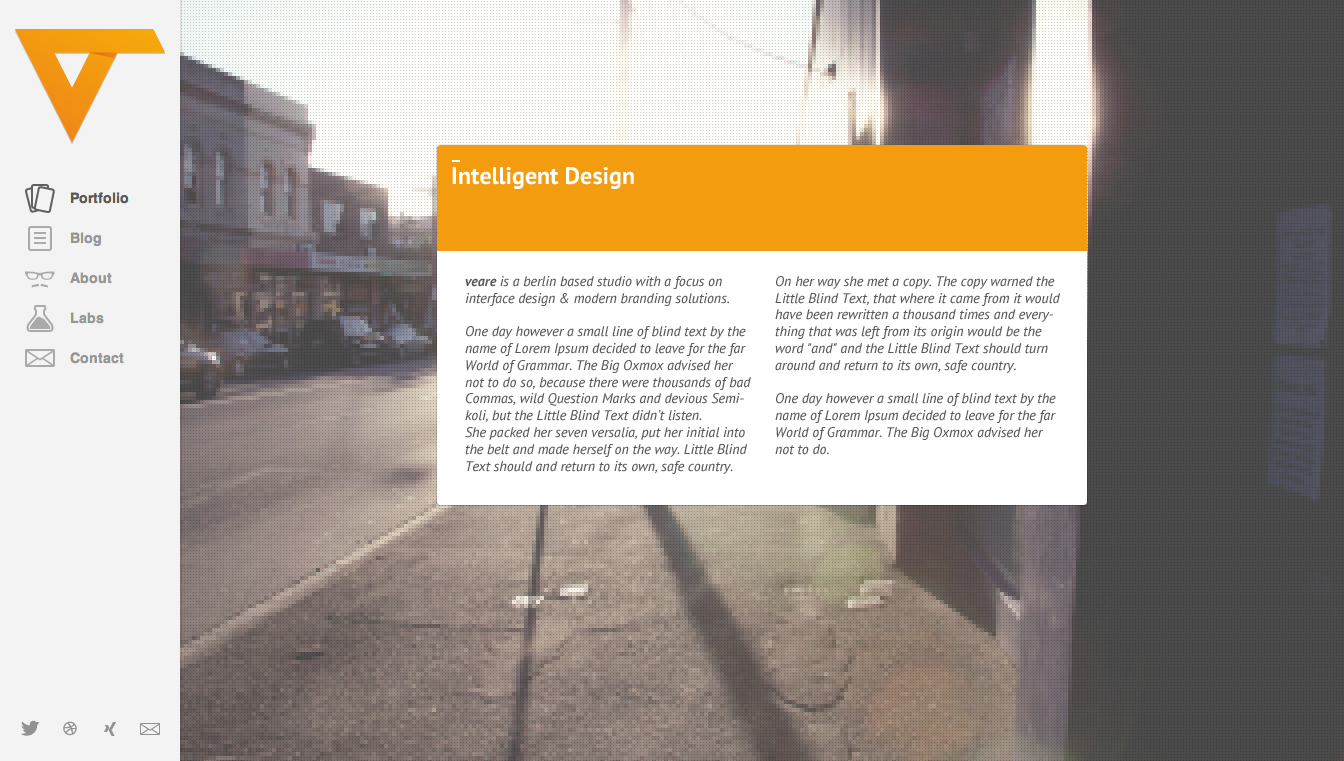
<style>
.page{position:relative;width:1344px;height:761px}
.page>*{position:absolute;margin:0}
.t1{font:24px "PTSans-Bold";color:#ffffff}
.t2{font:14px "PTSans-Italic";color:#5a5a5a}
.t3{font:14px "PTSans-BoldItalic";color:#5a5a5a}
</style>
<div class="page">
<p class="t1" style="left:452px;top:167px;width:182px;height:22px">Intelligent Design</p>
<p class="t2" style="left:465px;top:276px;width:286px;height:198px"><span class="t3">veare </span>is a berlin based studio with a focus on interface design &amp; modern branding solutions.<br><br>One day however a small line of blind text by the name of Lorem Ipsum decided to leave for the far World of Grammar. The Big Oxmox advised her not to do so, because there were thousands of bad Commas, wild Question Marks and devious Semikoli, but the Little Blind Text didn’t listen. <br>She packed her seven versalia, put her initial into the belt and made herself on the way. Little Blind Text should and return to its own, safe country.</p>
<p class="t2" style="left:775px;top:276px;width:285px;height:179px">On her way she met a copy. The copy warned the Little Blind Text, that where it came from it would have been rewritten a thousand times and everything that was left from its origin would be the word "and" and the Little Blind Text should turn around and return to its own, safe country.<br><br>One day however a small line of blind text by the name of Lorem Ipsum decided to leave for the far World of Grammar. The Big Oxmox advised her not to do.</p>
</div>
